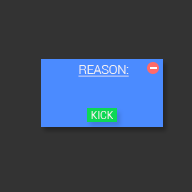
<style>
.page{position:relative;width:192px;height:192px;background:#333333}
.page>*{position:absolute;margin:0}
.t1{font:12.5px "Roboto-Light";color:#f1f1f1;text-decoration:underline}
.t2{font:10.4px "Roboto-Light";color:#f1f1f1}
</style>
<div class="page">
<p class="t1" style="left:78px;top:65px;width:51px;height:12px">REASON:</p>
<p class="t2" style="left:91px;top:111px;width:22px;height:8px">KICK</p>
</div>
